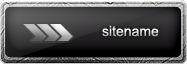
<style>
.page{position:relative;width:187px;height:64px}
.page>*{position:absolute;margin:0}
.t1{font:14px "ArialMT"}
</style>
<div class="page">
<p class="t1" style="left:102px;top:25px;width:57px;height:12px">sitename</p>
</div>
